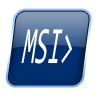
<style>
.page{position:relative;width:96px;height:96px;background:#ffffff}
.page>*{position:absolute;margin:0}
.t1{font:53.1px "Consolas";color:#ffffff;scale:0.43 1}
</style>
<div class="page">
<p class="t1" style="left:21px;top:28px;width:51px;height:36px">MSI&gt;</p>
</div>
